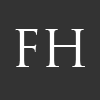
<style>
.page{position:relative;width:100px;height:100px;background:#333333}
.page>*{position:absolute;margin:0}
.t1{font:50px "TrajanPro-Regular";color:#ffffff}
</style>
<div class="page">
<p class="t1" style="left:15px;top:29px;width:70px;height:38px">FH</p>
</div>
